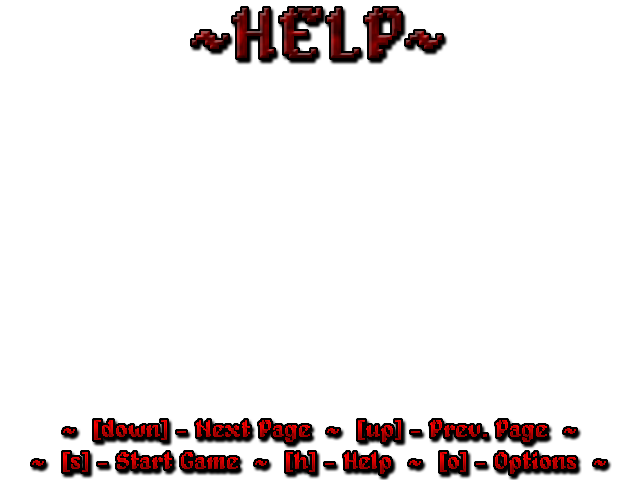
<style>
.page{position:relative;width:640px;height:480px;background:#ffffff}
.page>*{position:absolute;margin:0}
.t1{font:72px "Alagard";text-transform:uppercase}
.t2{font:24px "Alagard"}
</style>
<div class="page">
<p class="t1" style="left:192px;top:8px;width:250px;height:50px">~Help~</p>
<p class="t2" style="left:63px;top:420px;width:513px;height:22px">~  [down] - Next Page  ~  [up] - Prev. Page  ~</p>
<p class="t2" style="left:32px;top:452px;width:574px;height:22px">~  [s] - Start Game  ~  [h] - Help  ~  [o] - Options  ~</p>
</div>
